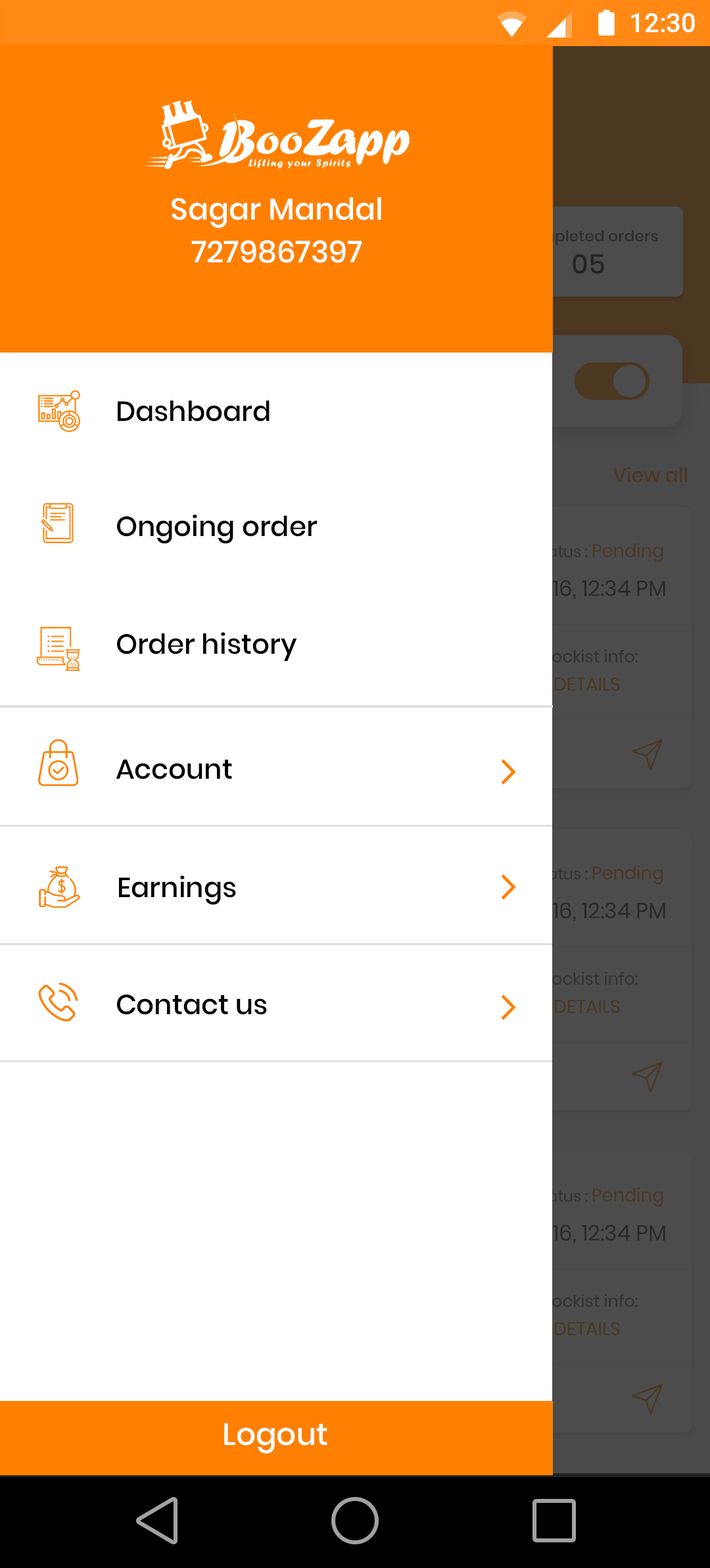
<style>
.page{position:relative;width:710px;height:1568px;background:#ffffff}
.page>*{position:absolute;margin:0}
.t1{font:30.3px "Poppins-Medium";color:#ffffff}
.t2{font:30.3px "Poppins-Medium";color:#ffffff;text-transform:uppercase}
.t3{font:27.6px "Poppins-Medium";color:#000000}
.t4{font:30.9px "Poppins-Medium";color:#ffffff}
</style>
<div class="page">
<p class="t1" style="left:172px;top:197px;width:209px;height:31px">Sagar Mandal</p>
<p class="t2" style="left:191px;top:240px;width:171px;height:23px">7279867397</p>
<p class="t3" style="left:118px;top:401px;width:152px;height:21px">Dashboard</p>
<p class="t3" style="left:117px;top:514px;width:200px;height:30px">Ongoing order</p>
<p class="t3" style="left:117px;top:632px;width:180px;height:29px">Order history</p>
<p class="t3" style="left:116px;top:759px;width:116px;height:20px">Account</p>
<p class="t3" style="left:119px;top:875px;width:117px;height:30px">Earnings</p>
<p class="t3" style="left:117px;top:994px;width:150px;height:21px">Contact us</p>
<p class="t4" style="left:224px;top:1423px;width:104px;height:31px">Logout</p>
</div>
